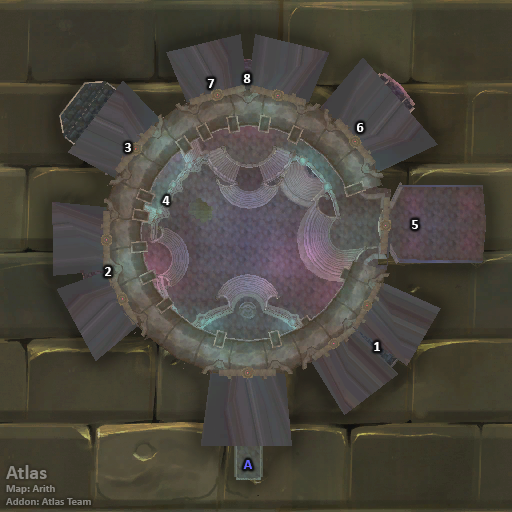
<style>
.page{position:relative;width:512px;height:512px}
.page>*{position:absolute;margin:0}
.t1{font:14px "Calibri-Bold";color:#ffffff}
.t2{font:14px "Calibri-Bold";color:#6666ff}
.t3{font:11px "Calibri-Bold";color:#8c8983}
.t4{font:20px "Calibri-Bold";color:#8c8983}
</style>
<div class="page">
<p class="t1" style="left:243px;top:74px;width:8px;height:9px">8</p>
<p class="t1" style="left:207px;top:79px;width:8px;height:9px">7</p>
<p class="t1" style="left:357px;top:123px;width:7px;height:9px">6</p>
<p class="t1" style="left:125px;top:143px;width:6px;height:9px">3</p>
<p class="t1" style="left:162px;top:196px;width:8px;height:9px">4</p>
<p class="t1" style="left:412px;top:220px;width:6px;height:9px">5</p>
<p class="t1" style="left:105px;top:267px;width:7px;height:9px">2</p>
<p class="t1" style="left:374px;top:342px;width:6px;height:9px">1</p>
<p class="t2" style="left:243px;top:460px;width:9px;height:9px">A</p>
<p class="t3" style="left:6px;top:465px;width:85px;height:40px"><span class="t4">Atlas<br></span>Map: Arith<br>Addon: Atlas Team</p>
</div>
